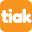
<style>
.page{position:relative;width:32px;height:32px;background:#f7941d}
.page>*{position:absolute;margin:0}
.t1{font:18px "FredokaOne-Regular";letter-spacing:-0.04em;color:#ffffff}
</style>
<div class="page">
<p class="t1" style="left:1px;top:8px;width:31px;height:15px">tiak</p>
</div>
